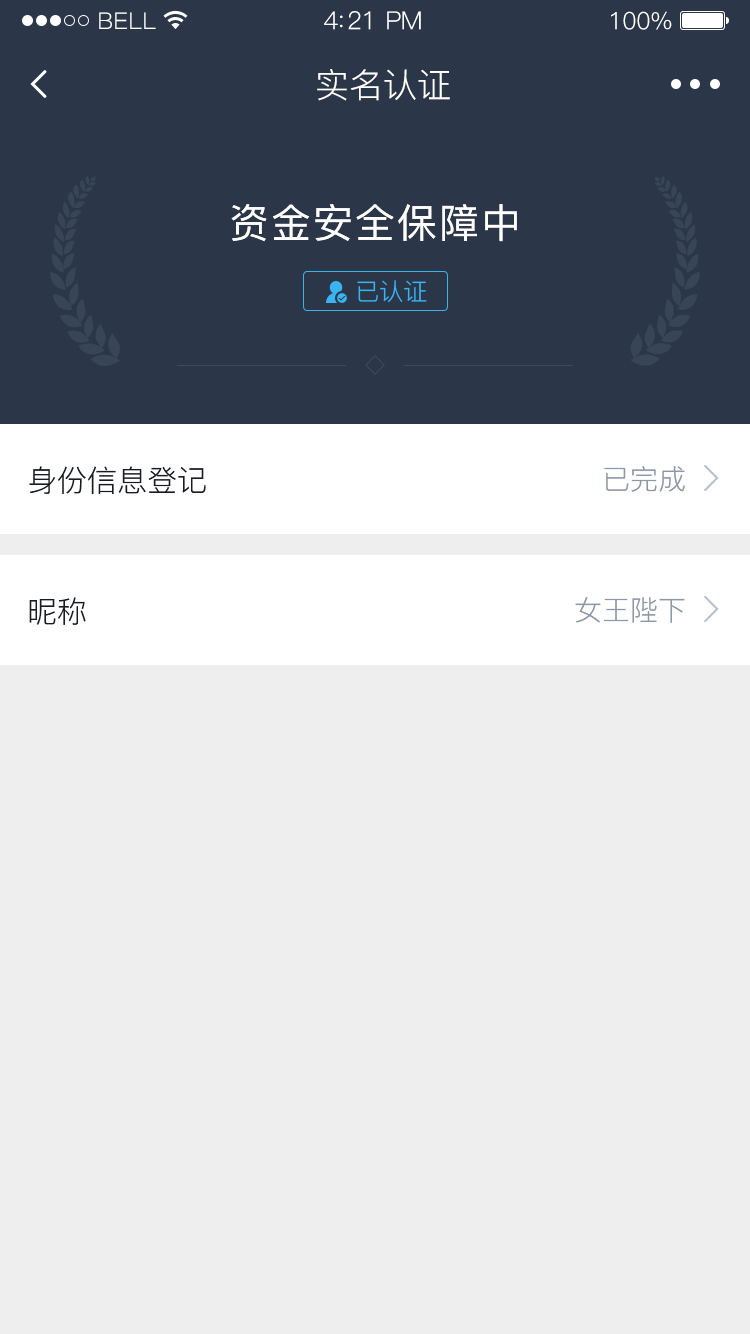
<style>
.page{position:relative;width:750px;height:1334px;background:#eeeeee}
.page>*{position:absolute;margin:0}
.t1{font:23px "PingFang-SC-Regular";letter-spacing:0.02em;color:#ffffff}
.t2{font:25px "PingFang-SC-Regular";letter-spacing:-0.02em;color:#ffffff}
.t3{font:24px "PingFang-SC-Regular";letter-spacing:-0.02em;color:#ffffff}
.t4{font:34px "PingFang-SC-Regular";color:#ffffff}
.t5{font:40px "PingFang-SC-Medium";letter-spacing:0.05em;color:#ffffff}
.t6{font:24px "PingFang-SC-Regular";color:#3ab3f1}
.t7{font:30px "PingFang-SC-Regular";color:#181b23}
.t8{font:28px "PingFang-SC-Regular";color:#8d98a7}
</style>
<div class="page">
<p class="t1" style="left:99px;top:12px;width:57px;height:17px">BELL</p>
<p class="t2" style="left:324px;top:11px;width:97px;height:19px">4:21 PM</p>
<p class="t3" style="left:611px;top:11px;width:61px;height:19px">100%</p>
<p class="t4" style="left:317px;top:69px;width:133px;height:32px">实名认证</p>
<p class="t5" style="left:231px;top:204px;width:286px;height:38px">资金安全保障中</p>
<p class="t6" style="left:357px;top:280px;width:70px;height:23px">已认证</p>
<p class="t7" style="left:29px;top:466px;width:177px;height:28px">身份信息登记</p>
<p class="t8" style="left:604px;top:466px;width:81px;height:26px">已完成</p>
<p class="t7" style="left:29px;top:597px;width:57px;height:28px">昵称</p>
<p class="t8" style="left:575px;top:597px;width:110px;height:26px">女王陛下</p>
</div>
